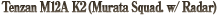
<style>
.page{position:relative;width:219px;height:15px;background:#ffffff}
.page>*{position:absolute;margin:0}
.t1{font:14px "RyuminPro-ExBold";letter-spacing:-0.08em;color:#4a3f32;font-weight:bold;scale:0.8 1}
</style>
<div class="page">
<p class="t1" style="left:1px;top:1px;width:216px;height:14px">Tenzan M12A K2 (Murata Squad. w/ Radar)</p>
</div>
